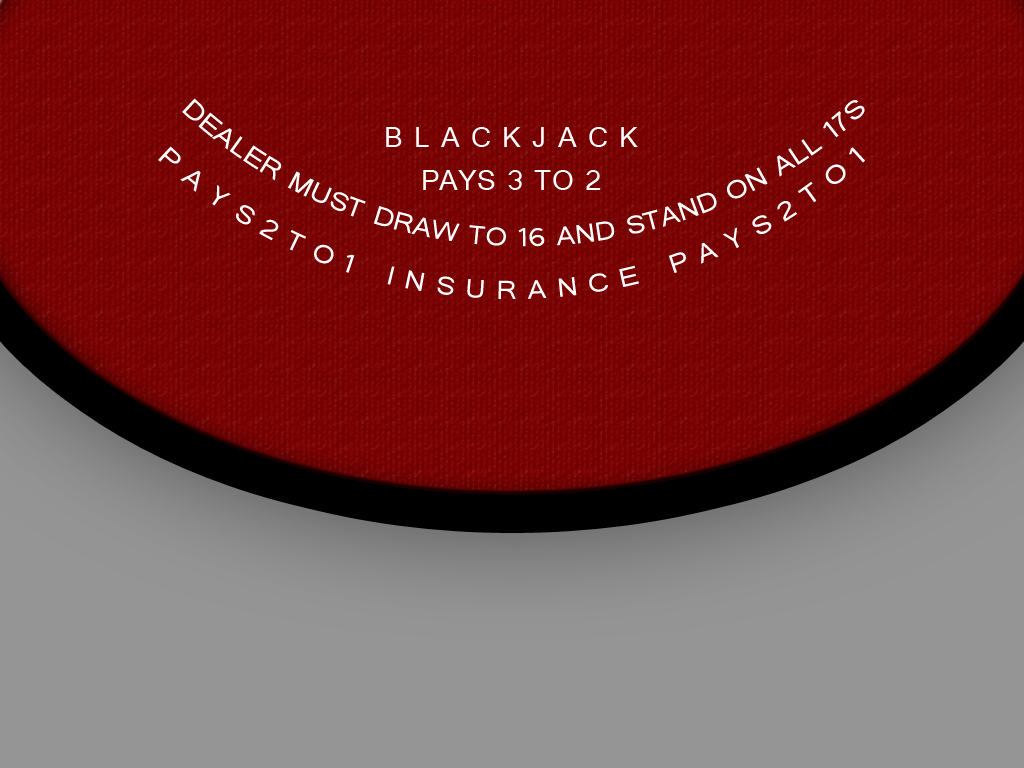
<style>
.page{position:relative;width:1024px;height:768px;background:#959595}
.page>*{position:absolute;margin:0}
.t1{font:32px "Tunga";color:#ffffff}
.t2{font:36px "Tunga";color:#ffffff}
</style>
<div class="page">
<p class="t1" style="left:182px;top:98px;width:683px;height:149px;text-align:center">DEALER MUST DRAW TO 16 AND STAND ON ALL 17S</p>
<p class="t2" style="left:386px;top:127px;width:252px;height:63px;text-align:center">B L A C K J A C K<br>PAYS 3 TO 2</p>
<p class="t1" style="left:158px;top:146px;width:707px;height:153px;text-align:center">P A Y S 2 T O 1   I N S U R A N C E   P A Y S 2 T O 1</p>
</div>
